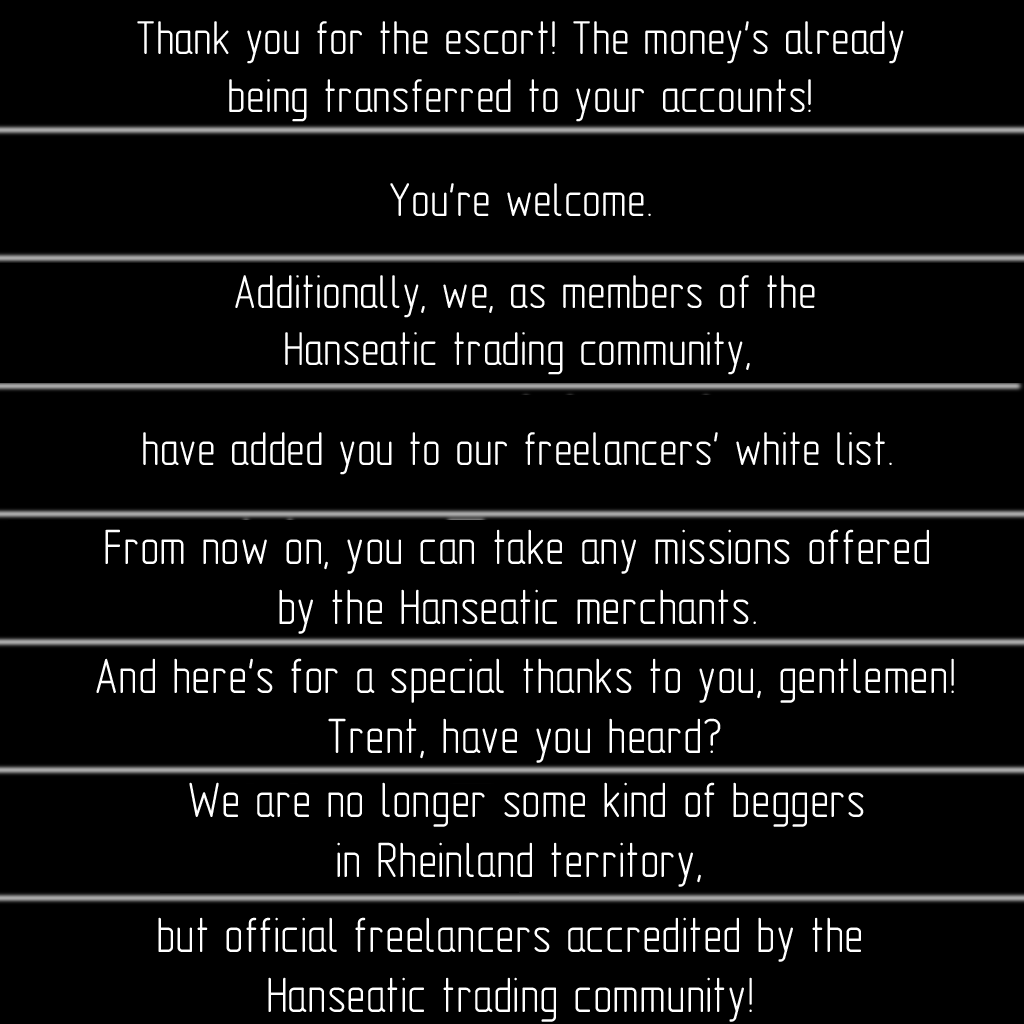
<style>
.page{position:relative;width:1024px;height:1024px;background:#000000}
.page>*{position:absolute;margin:0}
.t1{font:48px "GOST-2.304-81typeA";color:#ffffff}
.t2{font:50px "GOST-2.304-81typeA";color:#ffffff}
</style>
<div class="page">
<p class="t1" style="left:137px;top:21px;width:767px;height:101px;text-align:center">Thank you for the escort! The money's already<br>being transferred to your accounts!</p>
<p class="t1" style="left:390px;top:183px;width:261px;height:33px">You're welcome.</p>
<p class="t1" style="left:235px;top:275px;width:580px;height:100px;text-align:center">Additionally, we, as members of the<br>Hanseatic trading community,</p>
<p class="t1" style="left:143px;top:432px;width:749px;height:43px">have added you to our freelancers' white list.</p>
<p class="t2" style="left:105px;top:529px;width:824px;height:105px;text-align:center">From now on, you can take any missions offered<br>by the Hanseatic merchants.</p>
<p class="t2" style="left:96px;top:658px;width:858px;height:105px;text-align:center">And here's for a special thanks to you, gentlemen!<br>Trent, have you heard?</p>
<p class="t2" style="left:189px;top:782px;width:675px;height:105px;text-align:center">We are no longer some kind of beggers<br>in Rheinland territory,</p>
<p class="t2" style="left:158px;top:917px;width:703px;height:105px;text-align:center">but official freelancers accredited by the<br>Hanseatic trading community!</p>
</div>
